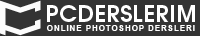
<style>
.page{position:relative;width:200px;height:36px;background:#333333}
.page>*{position:absolute;margin:0}
.t1{font:23px "AvantGarde-Bold";letter-spacing:0.02em;color:#ffffff;text-transform:uppercase}
.t2{font:8px "Arial-BoldMT";letter-spacing:0.116em;color:#ffffff;text-transform:uppercase}
</style>
<div class="page">
<p class="t1" style="left:47px;top:5px;width:148px;height:17px">PCDERSLERIM</p>
<p class="t2" style="left:47px;top:25px;width:148px;height:6px">Online Photoshop DersLeri</p>
</div>
